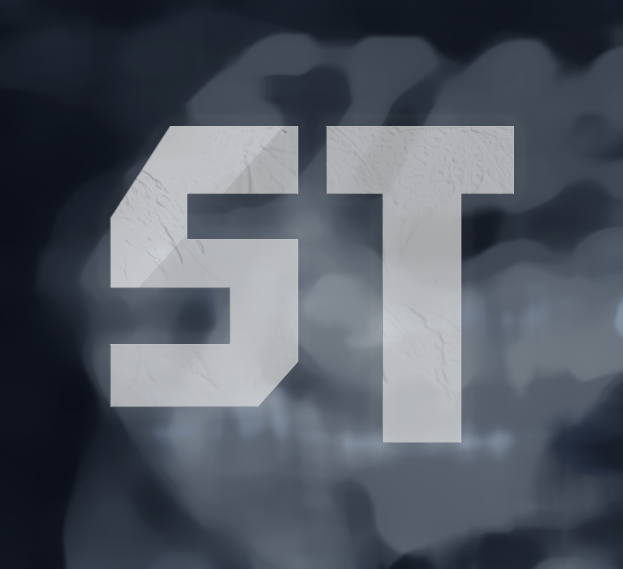
<style>
.page{position:relative;width:623px;height:569px}
.page>*{position:absolute;margin:0}
.t1{font:400px "Dimitri";color:#b6b8bc}
</style>
<div class="page">
<p class="t1" style="left:109px;top:126px;width:405px;height:317px">ST</p>
</div>
